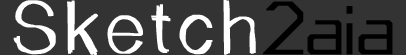
<style>
.page{position:relative;width:406px;height:55px;background:#333333}
.page>*{position:absolute;margin:0}
.t1{font:75px "Sketchtica";color:#ffffff;font-weight:bold}
.t2{font:100px "JD-Code";color:#000000;font-weight:bold}
</style>
<div class="page">
<p class="t1" style="left:13px;top:0px;width:380px;height:55px">Sketch<span class="t2">2aia</span></p>
</div>
